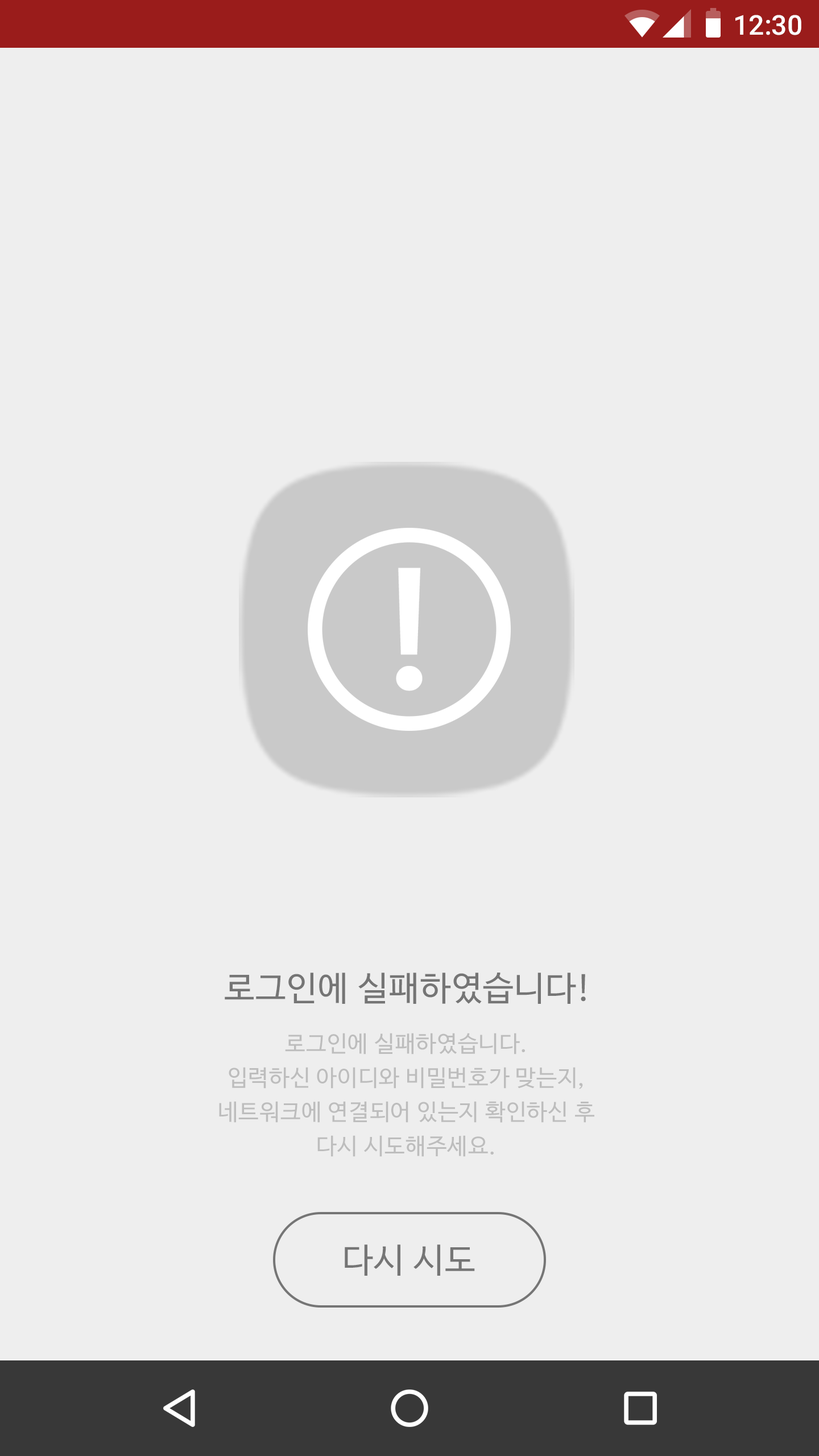
<style>
.page{position:relative;width:819px;height:1456px;background:#eeeeee}
.page>*{position:absolute;margin:0}
.t1{font:27.3px "Roboto-Medium";color:#ffffff}
.t2{font:34.1px "NanumBarunGothic";letter-spacing:0.025em;color:#757575}
.t3{font:22.7px/34.1px "NanumBarunGothic";letter-spacing:0.025em;color:#bdbdbd}
</style>
<div class="page">
<p class="t1" style="left:735px;top:15px;width:66px;height:20px">12:30</p>
<p class="t2" style="left:225px;top:973px;width:361px;height:31px">로그인에 실패하였습니다!</p>
<p class="t3" style="left:219px;top:1033px;width:375px;height:124px;text-align:center">로그인에 실패하였습니다.<br>입력하신 아이디와 비밀번호가 맞는지,<br>네트워크에 연결되어 있는지 확인하신 후<br>다시 시도해주세요.</p>
<p class="t2" style="left:345px;top:1244px;width:130px;height:32px">다시 시도</p>
</div>
